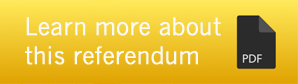
<style>
.page{position:relative;width:298px;height:84px}
.page>*{position:absolute;margin:0}
.t1{font:24px "NewsGothicMT";color:#f9f9f9;font-weight:bold;scale:0.92 1}
</style>
<div class="page">
<p class="t1" style="left:25px;top:17px;width:196px;height:48px">Learn more about<br>this referendum</p>
</div>
